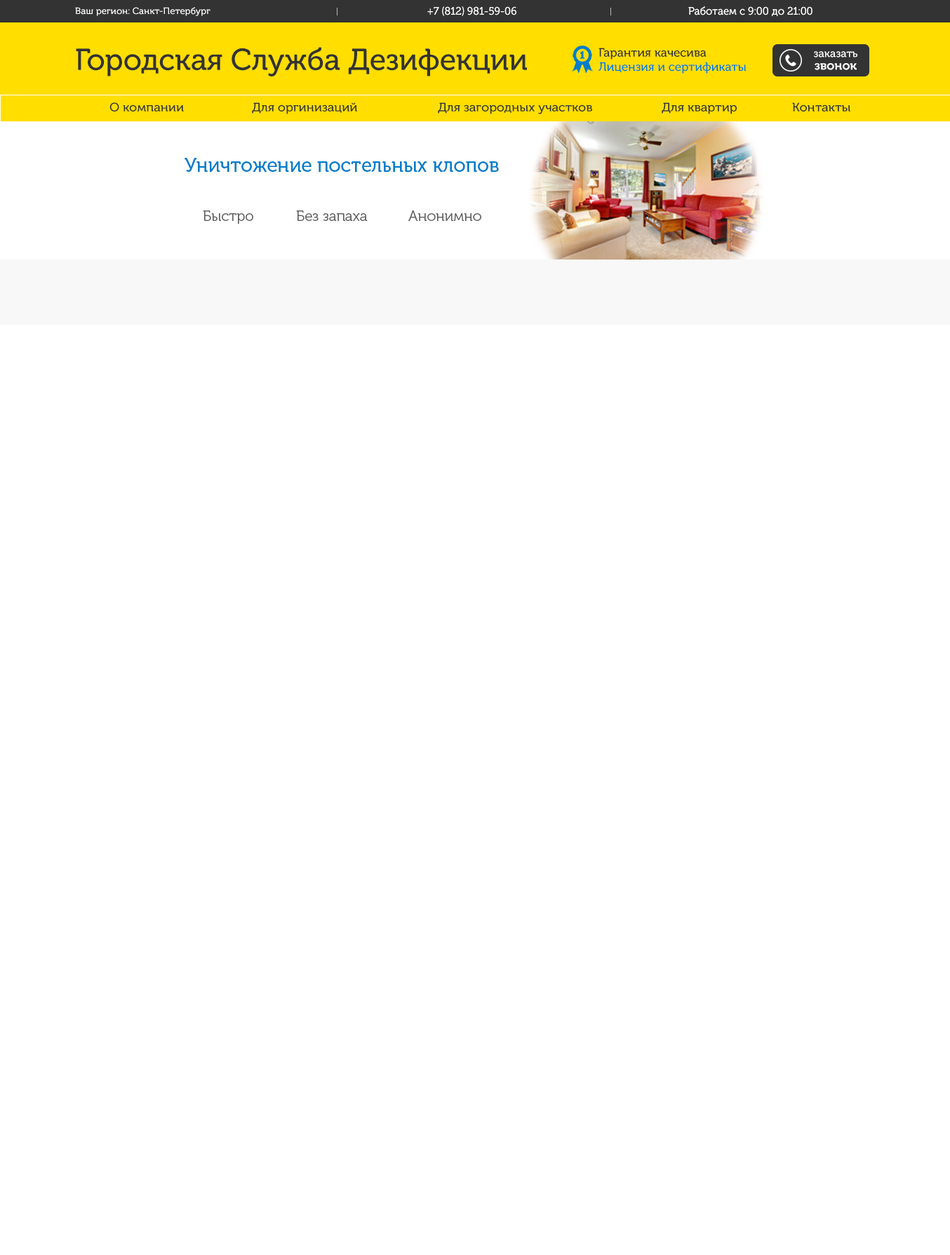
<style>
.page{position:relative;width:950px;height:1255px;background:#ffffff}
.page>*{position:absolute;margin:0}
.t1{font:9.2px "MuseoCyrl-500";color:#ffffff}
.t2{font:11px "MuseoCyrl-500";color:#ffffff;scale:0.96 1}
.t3{font:30.3px "MuseoCyrl-500";color:#333333}
.t4{font:12.1px/14.2px "MuseoCyrl-500";color:#007dcc}
.t5{font:12.1px/14.2px "MuseoCyrl-500";color:#333333}
.t6{font:10.8px/12.6px "MuseoCyrl-500";color:#ffffff}
.t7{font:12.2px/12.6px "MuseoCyrl-700";color:#ffffff}
.t8{font:12.3px "MuseoCyrl-500";color:#333333}
.t9{font:19.7px "MuseoCyrl-500";color:#007dcc}
.t10{font:14.8px "MuseoCyrl-300";color:#5e5e5e}
</style>
<div class="page">
<p class="t1" style="left:75px;top:7px;width:135px;height:9px">Ваш регион: Санкт-Петербург</p>
<p class="t2" style="left:427px;top:6px;width:89px;height:10px">+7 (812) 981-59-06</p>
<p class="t2" style="left:688px;top:6px;width:124px;height:10px">Работаем с 9:00 до 21:00</p>
<p class="t3" style="left:76px;top:47px;width:451px;height:29px">Городская Служба Дезифекции</p>
<p class="t4" style="left:598px;top:48px;width:149px;height:26px"><span class="t5">Гарантия качесива<br></span>Лицензия и сертификаты</p>
<p class="t6" style="left:814px;top:51px;width:43px;height:19px;text-align:center">заказать<br><span class="t7">звонок</span></p>
<p class="t8" style="left:109px;top:102px;width:75px;height:10px">О компании</p>
<p class="t8" style="left:252px;top:102px;width:105px;height:12px">Для оргинизаций</p>
<p class="t8" style="left:438px;top:102px;width:154px;height:12px">Для загородных участков</p>
<p class="t8" style="left:662px;top:102px;width:75px;height:12px">Для квартир</p>
<p class="t8" style="left:792px;top:102px;width:58px;height:10px">Контакты</p>
<p class="t9" style="left:185px;top:158px;width:314px;height:14px">Уничтожение постельных клопов</p>
<p class="t10" style="left:203px;top:210px;width:50px;height:14px">Быстро</p>
<p class="t10" style="left:296px;top:210px;width:72px;height:11px">Без запаха</p>
<p class="t10" style="left:408px;top:210px;width:73px;height:11px">Анонимно</p>
</div>
